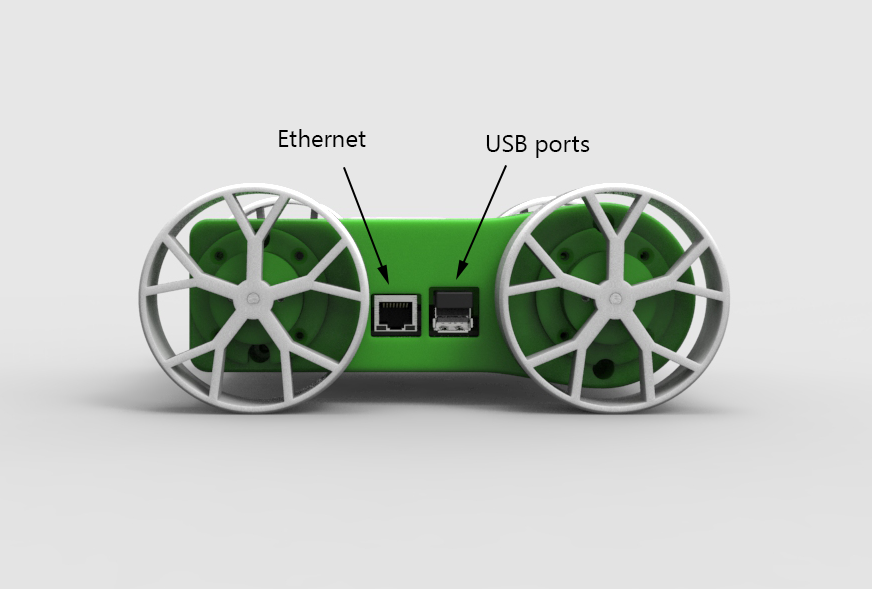
<style>
.page{position:relative;width:872px;height:589px;background:#e7e7e7}
.page>*{position:absolute;margin:0}
.t1{font:24px "Leelawadee";color:#000000}
</style>
<div class="page">
<p class="t1" style="left:279px;top:129px;width:87px;height:18px">Ethernet</p>
<p class="t1" style="left:486px;top:135px;width:104px;height:23px">USB ports</p>
</div>
